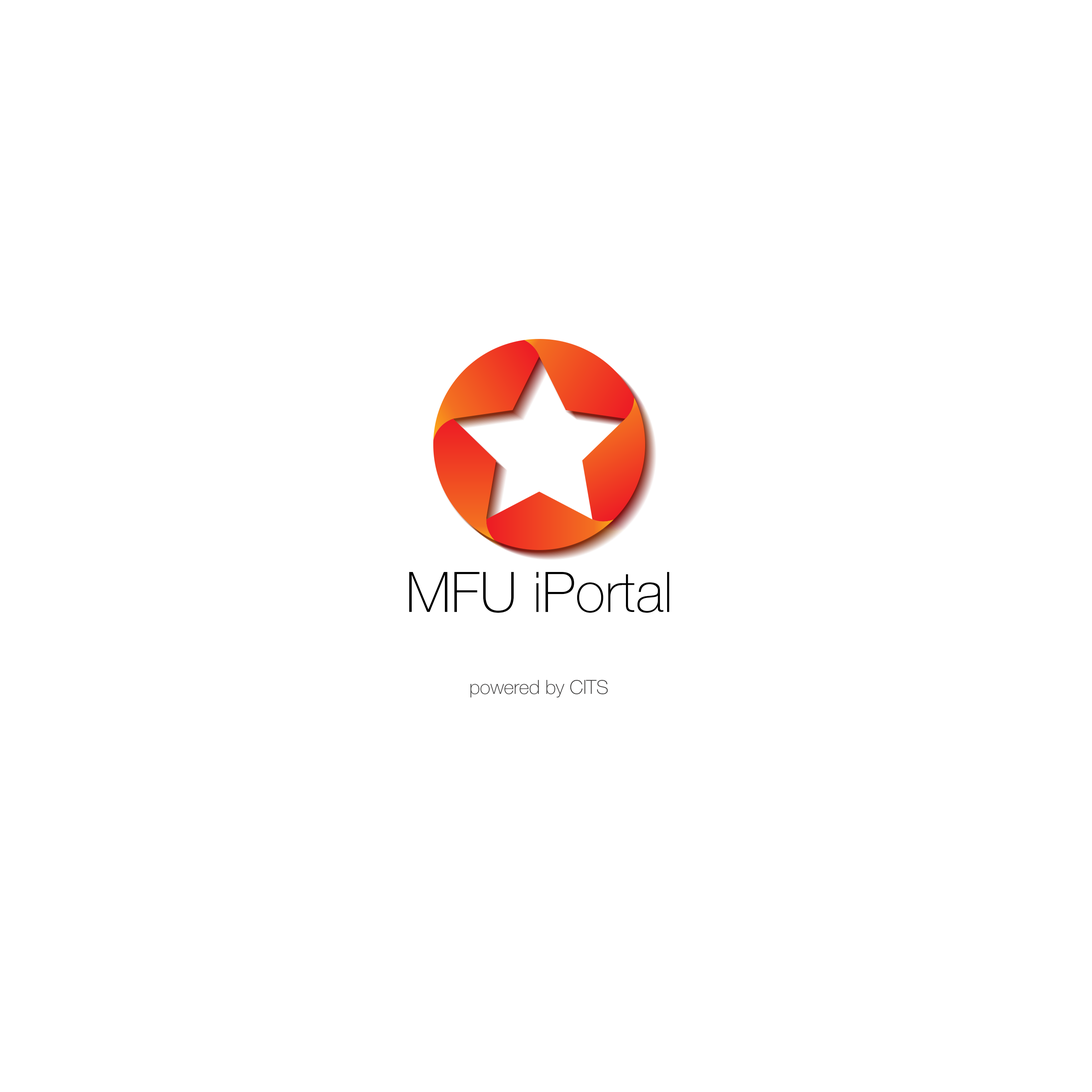
<style>
.page{position:relative;width:1092px;height:1092px;background:#ffffff}
.page>*{position:absolute;margin:0}
.t1{font:56px "HelveticaNeue-Thin";color:#000000}
.t2{font:19.2px "HelveticaNeue-Thin";color:#353434}
</style>
<div class="page">
<p class="t1" style="left:409px;top:572px;width:261px;height:41px">MFU iPortal</p>
<p class="t2" style="left:470px;top:680px;width:138px;height:17px">powered by CITS</p>
</div>
